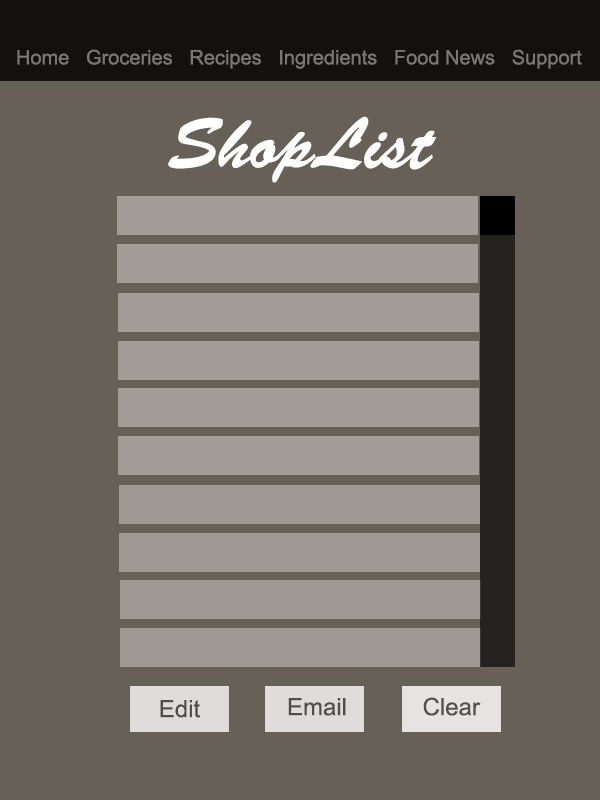
<style>
.page{position:relative;width:600px;height:800px;background:#676056}
.page>*{position:absolute;margin:0}
.t1{font:20px "ArialMT";color:#777776}
.t2{font:72px "BrushScriptStd";color:#ffffff}
.t3{font:24px "ArialMT";color:#4f4e4d}
.t4{font:24px "ArialMT";color:#515150}
</style>
<div class="page">
<p class="t1" style="left:17px;top:49px;width:565px;height:20px">Home   Groceries   Recipes   Ingredients   Food News   Support</p>
<p class="t2" style="left:168px;top:116px;width:268px;height:67px">ShopList</p>
<p class="t3" style="left:160px;top:700px;width:41px;height:18px">Edit</p>
<p class="t3" style="left:288px;top:698px;width:58px;height:18px">Email</p>
<p class="t4" style="left:423px;top:697px;width:58px;height:19px">Clear</p>
</div>
